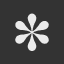
<style>
.page{position:relative;width:64px;height:64px;background:#333333}
.page>*{position:absolute;margin:0}
.t1{font:52px "MS-Gothic";color:#ffffff}
</style>
<div class="page">
<p class="t1" style="left:15px;top:13px;width:34px;height:38px;opacity:0.9">✽</p>
</div>
